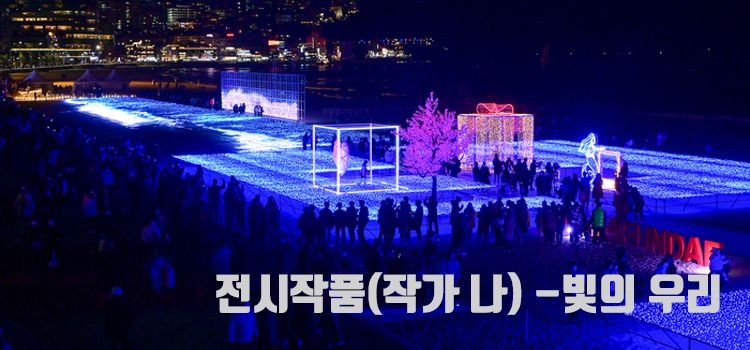
<style>
.page{position:relative;width:750px;height:350px}
.page>*{position:absolute;margin:0}
.t1{font:41.7px "TmonMonsoriBlack";color:#d0d0d0}
</style>
<div class="page">
<p class="t1" style="left:216px;top:272px;width:504px;height:43px">전시작품(작가 나) -빛의 우리</p>
</div>
